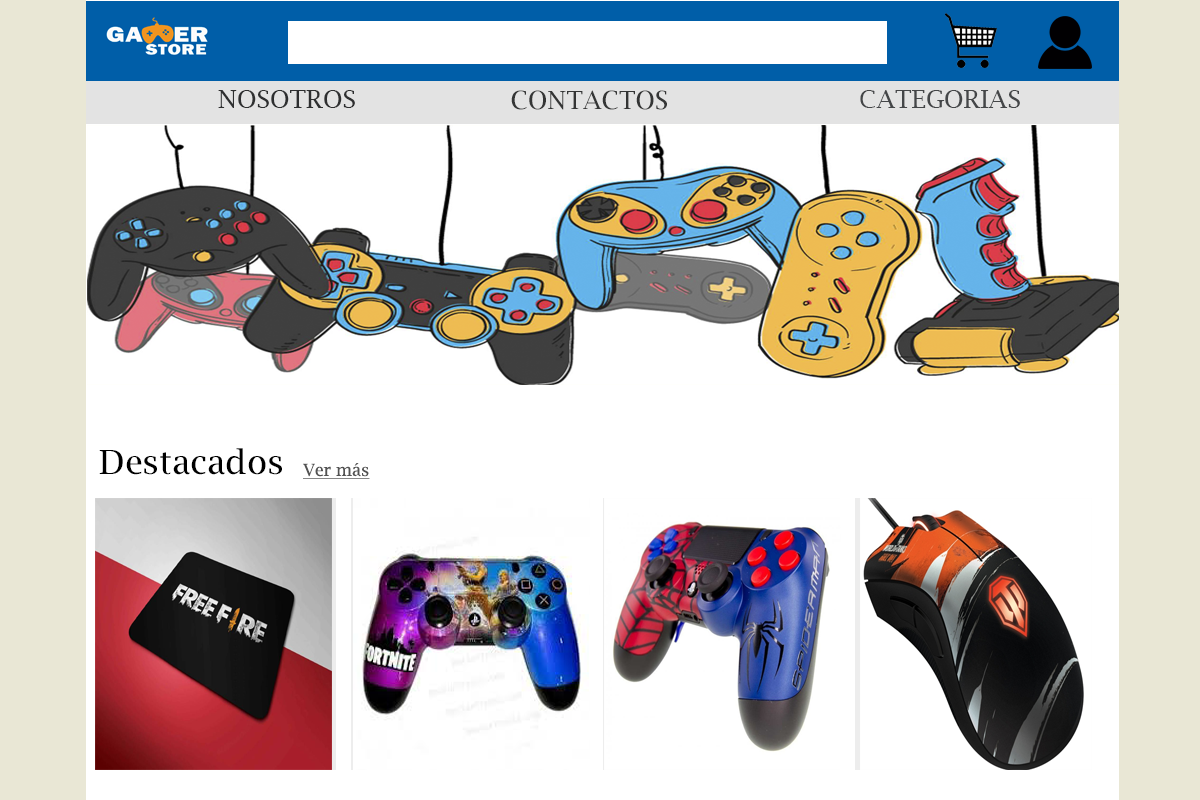
<style>
.page{position:relative;width:1200px;height:800px;background:#ffffff}
.page>*{position:absolute;margin:0}
.t1{font:25px "LucidaBright";color:#2e2f30}
.t2{font:25px "LucidaBright";color:#343535}
.t3{font:25px "LucidaBright";color:#444648}
.t4{font:33.3px "LucidaBright";color:#000000}
.t5{font:16.7px "LucidaBright";color:#525252;text-decoration:underline}
</style>
<div class="page">
<p class="t1" style="left:218px;top:90px;width:137px;height:18px">NOSOTROS</p>
<p class="t2" style="left:511px;top:90px;width:156px;height:20px">CONTACTOS</p>
<p class="t3" style="left:860px;top:90px;width:160px;height:18px">CATEGORIAS</p>
<p class="t4" style="left:99px;top:448px;width:183px;height:27px">Destacados</p>
<p class="t5" style="left:303px;top:463px;width:67px;height:16px">Ver más</p>
</div>
